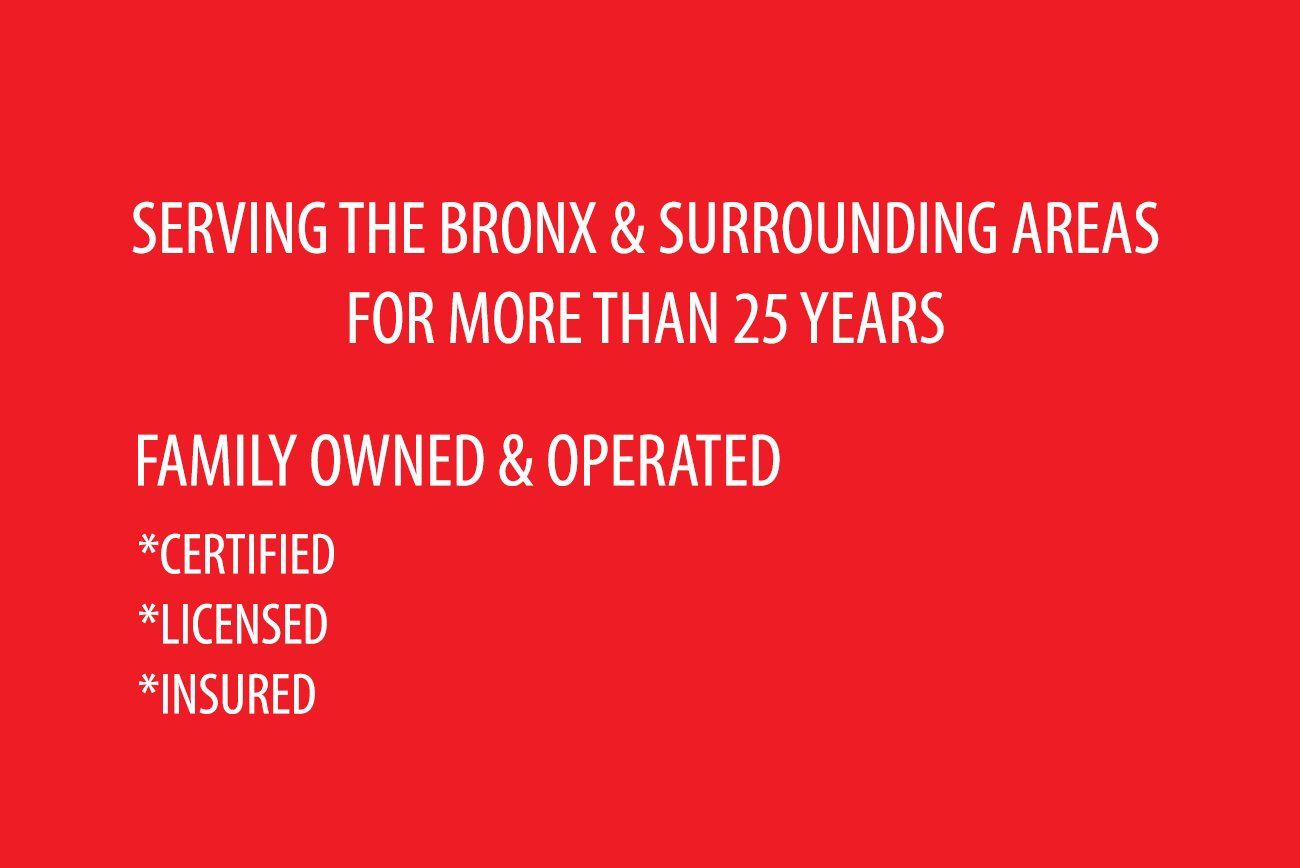
<style>
.page{position:relative;width:1300px;height:868px;background:#ee1c24}
.page>*{position:absolute;margin:0}
.t1{font:75px "MyriadPro-Cond";color:#ffffff}
.t2{font:58.3px "MyriadPro-Cond";color:#ffffff}
</style>
<div class="page">
<p class="t1" style="left:132px;top:201px;width:1027px;height:143px;text-align:center">SERVING THE BRONX &amp; SURROUNDING AREAS<br>FOR MORE THAN 25 YEARS</p>
<p class="t1" style="left:138px;top:434px;width:642px;height:52px">FAMILY OWNED &amp; OPERATED</p>
<p class="t2" style="left:139px;top:533px;width:195px;height:181px">*CERTIFIED<br>*LICENSED<br>*INSURED</p>
</div>
